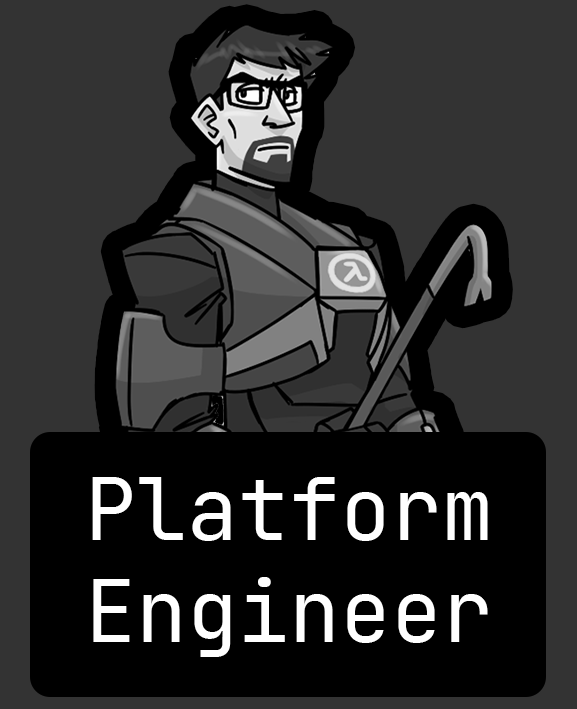
<style>
.page{position:relative;width:577px;height:709px;background:#000000}
.page>*{position:absolute;margin:0}
.t1{font:85px "JetBrainsMono-Regular";color:#ffffff}
</style>
<div class="page">
<p class="t1" style="left:92px;top:477px;width:396px;height:180px;text-align:center">Platform<br>Engineer</p>
</div>
